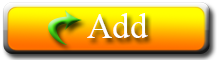
<style>
.page{position:relative;width:220px;height:60px}
.page>*{position:absolute;margin:0}
.t1{font:35px "TimesNewRomanPSMT";color:#ffffff}
</style>
<div class="page">
<p class="t1" style="left:87px;top:13px;width:61px;height:25px">Add</p>
</div>
